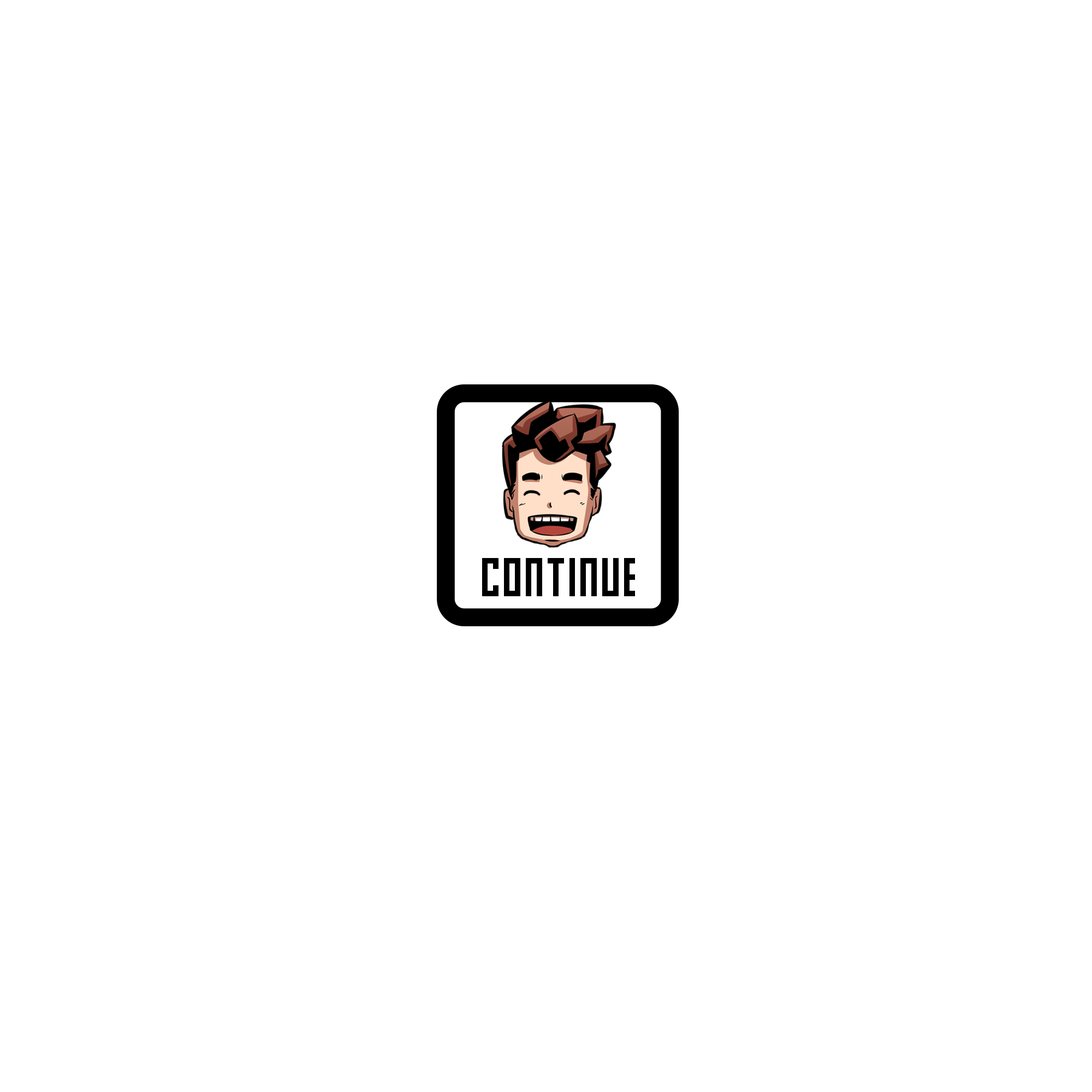
<style>
.page{position:relative;width:1092px;height:1092px;background:#ffffff}
.page>*{position:absolute;margin:0}
.t1{font:54.6px "pxl";color:#000000}
</style>
<div class="page">
<p class="t1" style="left:482px;top:558px;width:153px;height:38px">CONTINUE</p>
</div>
